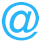
<style>
.page{position:relative;width:42px;height:42px;background:#ffffff}
.page>*{position:absolute;margin:0}
.t1{font:52px "FZHTJW--GB1-0";letter-spacing:0.005em;color:#29b6f6}
</style>
<div class="page">
<p class="t1" style="left:1px;top:1px;width:38px;height:40px">@</p>
</div>
